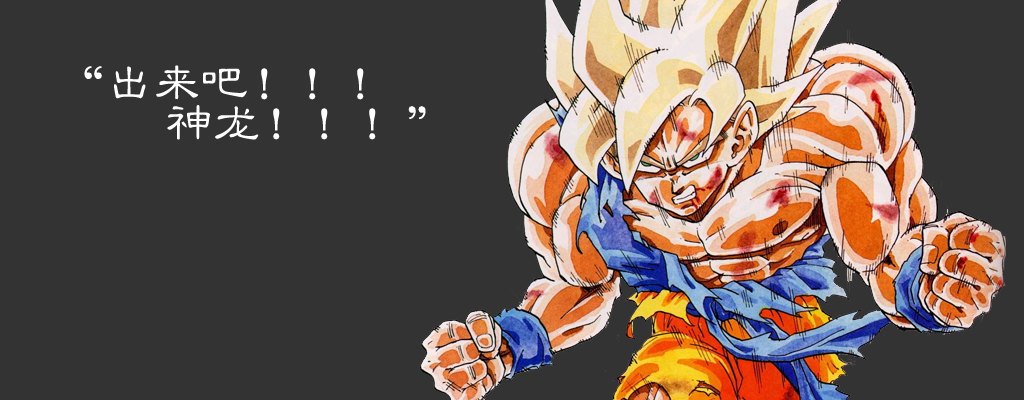
<style>
.page{position:relative;width:1024px;height:400px;background:#333333}
.page>*{position:absolute;margin:0}
.t1{font:48px/40px "GBJenLei-Medium";color:#ffffff}
</style>
<div class="page">
<p class="t1" style="left:84px;top:65px;width:342px;height:75px">“出来吧！！！<br>   神龙！！！”</p>
</div>
